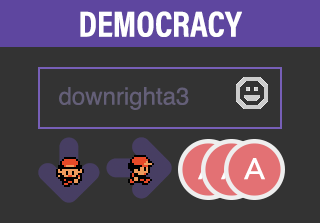
<style>
.page{position:relative;width:320px;height:223px;background:#333333}
.page>*{position:absolute;margin:0}
.t1{font:36.3px "AcuminProCond-Bold";color:#ffffff;text-transform:uppercase}
.t2{font:24px "Helvetica";color:#645f78}
.t3{font:29.4px "Avenir-Medium";color:#ffffff}
</style>
<div class="page">
<p class="t1" style="left:80px;top:11px;width:162px;height:26px">Democracy</p>
<p class="t2" style="left:59px;top:87px;width:130px;height:23px">downrighta3</p>
<p class="t3" style="left:244px;top:158px;width:21px;height:22px">A</p>
</div>
